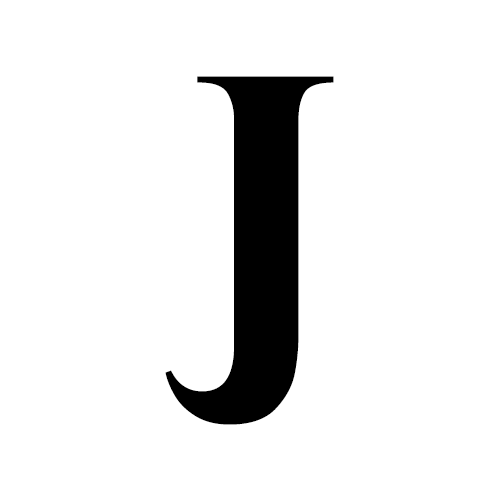
<style>
.page{position:relative;width:500px;height:500px;background:#ffffff}
.page>*{position:absolute;margin:0}
.t1{font:401.4px "PerpetuaTitlingMT-Bold";color:#000000}
</style>
<div class="page">
<p class="t1" style="left:165px;top:76px;width:169px;height:349px">J</p>
</div>
